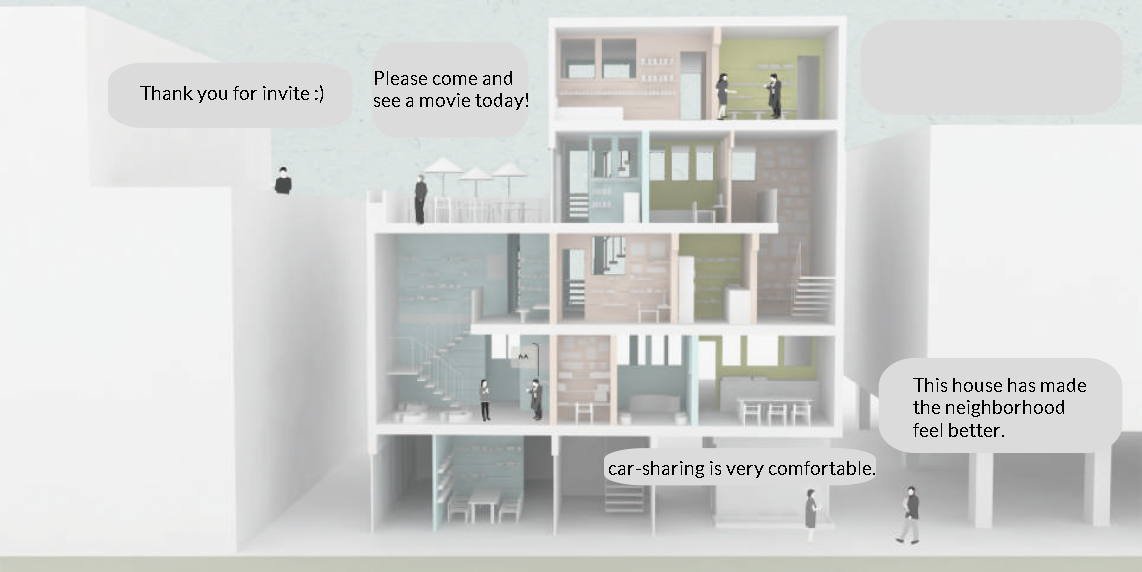
<style>
.page{position:relative;width:1142px;height:572px}
.page>*{position:absolute;margin:0}
.t1{font:18.7px "Lato-Regular";color:#000000}
</style>
<div class="page">
<p class="t1" style="left:374px;top:71px;width:154px;height:39px">Please come and<br>see a movie today!</p>
<p class="t1" style="left:140px;top:85px;width:183px;height:18px">Thank you for invite :)</p>
<p class="t1" style="left:913px;top:378px;width:173px;height:59px">This house has made<br>the neighborhood<br>feel better.</p>
<p class="t1" style="left:609px;top:461px;width:266px;height:17px">car-sharing is very comfortable.</p>
</div>
